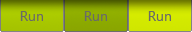
<style>
.page{position:relative;width:192px;height:32px}
.page>*{position:absolute;margin:0}
.t1{font:14px "SegoeUI";color:#696969}
</style>
<div class="page">
<p class="t1" style="left:20px;top:11px;width:23px;height:10px">Run</p>
<p class="t1" style="left:84px;top:11px;width:23px;height:10px">Run</p>
<p class="t1" style="left:148px;top:11px;width:23px;height:10px">Run</p>
</div>
